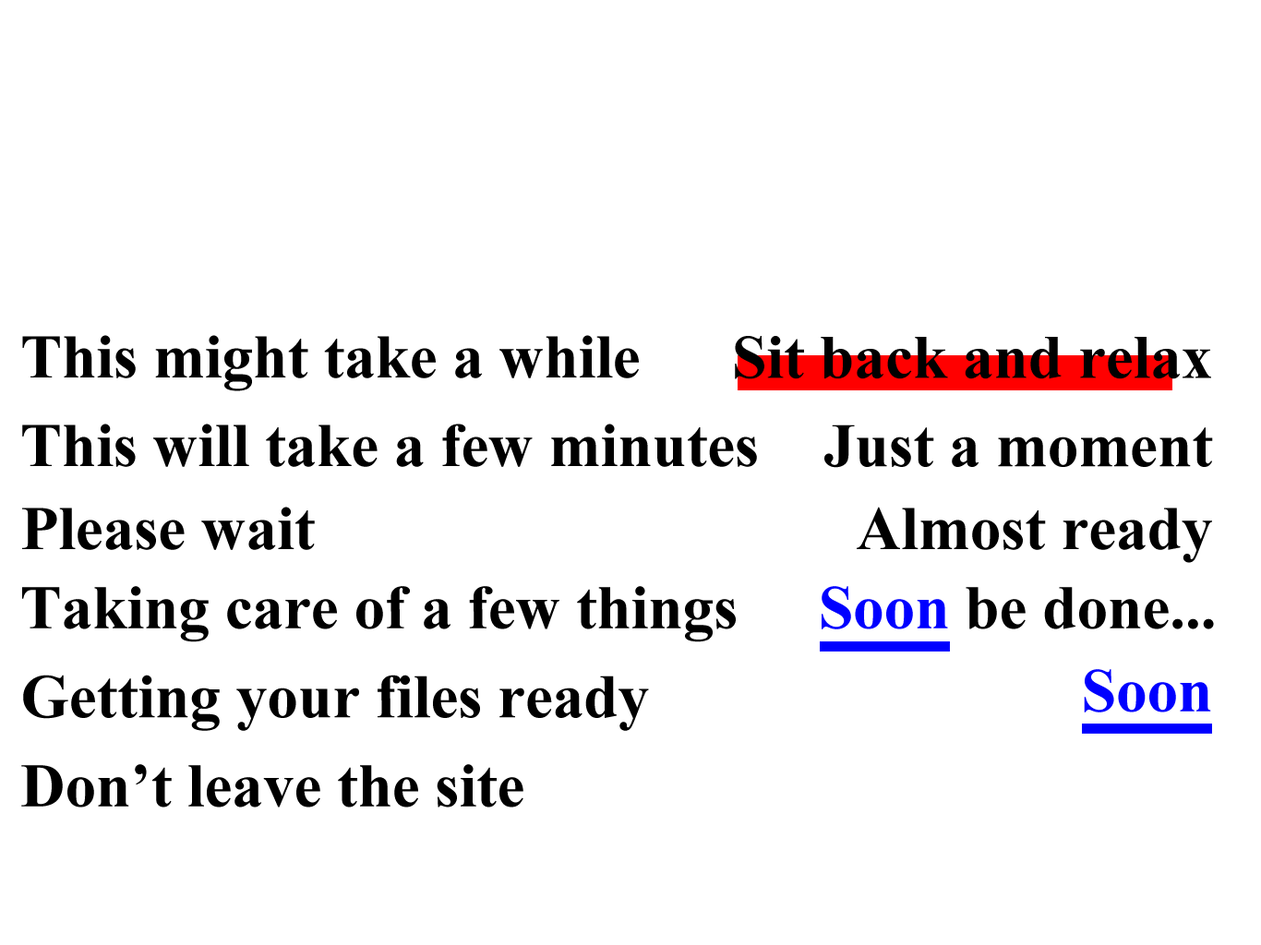
<style>
.page{position:relative;width:1261px;height:945px;background:#ffffff}
.page>*{position:absolute;margin:0}
.t1{font:62px "TimesNewRomanPS-BoldMT";color:#000000}
.t2{font:62px "TimesNewRomanPS-BoldMT";color:#0000ff}
</style>
<div class="page">
<p class="t1" style="left:22px;top:335px;width:617px;height:56px">This might take a while</p>
<p class="t1" style="left:735px;top:336px;width:476px;height:43px">Sit back and relax</p>
<p class="t1" style="left:22px;top:424px;width:735px;height:43px">This will take a few minutes</p>
<p class="t1" style="left:825px;top:425px;width:388px;height:43px">Just a moment</p>
<p class="t1" style="left:22px;top:507px;width:293px;height:43px">Please wait</p>
<p class="t1" style="left:857px;top:507px;width:355px;height:56px">Almost ready</p>
<p class="t1" style="left:22px;top:586px;width:714px;height:57px">Taking care of a few things</p>
<p class="t1" style="left:822px;top:586px;width:392px;height:44px"><span class="t2">Soon</span> be done...</p>
<p class="t1" style="left:23px;top:675px;width:626px;height:56px">Getting your files ready</p>
<p class="t2" style="left:1084px;top:669px;width:127px;height:44px">Soon</p>
<p class="t1" style="left:21px;top:764px;width:503px;height:44px">Don’t leave the site</p>
</div>
